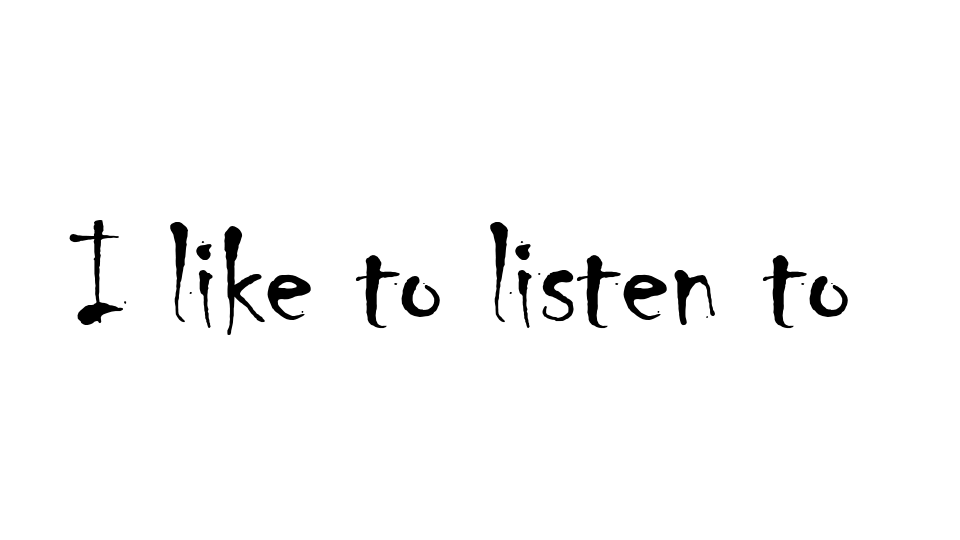
<style>
.page{position:relative;width:960px;height:540px;background:#ffffff}
.page>*{position:absolute;margin:0}
.t1{font:150px "Chiller-Regular";color:#000000}
</style>
<div class="page">
<p class="t1" style="left:69px;top:220px;width:779px;height:115px">I like to listen to</p>
</div>
